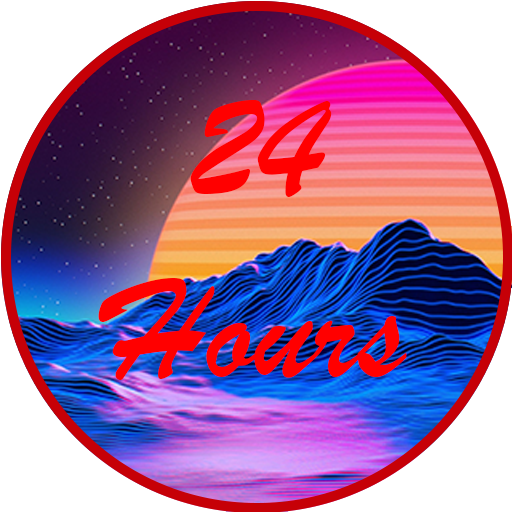
<style>
.page{position:relative;width:512px;height:512px;background:#ffffff}
.page>*{position:absolute;margin:0}
.t1{font:152.8px "BrushScriptMT";color:#ff0000}
</style>
<div class="page">
<p class="t1" style="left:98px;top:100px;width:309px;height:280px;text-align:center">24Hours</p>
</div>
